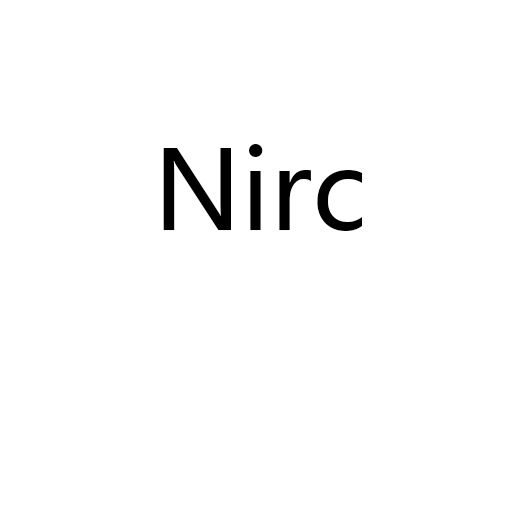
<style>
.page{position:relative;width:512px;height:512px;background:#ffffff}
.page>*{position:absolute;margin:0}
.t1{font:108.6px "MicrosoftYaHei";color:#000000}
</style>
<div class="page">
<p class="t1" style="left:163px;top:144px;width:200px;height:87px">Nirc</p>
</div>
